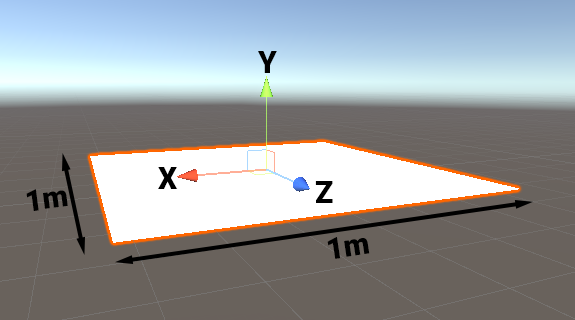
<style>
.page{position:relative;width:575px;height:320px;background:#69625c}
.page>*{position:absolute;margin:0}
.t1{font:30px "Roboto-Black";color:#000000}
</style>
<div class="page">
<p class="t1" style="left:258px;top:51px;width:19px;height:22px">Y</p>
<p class="t1" style="left:158px;top:167px;width:20px;height:22px">X</p>
<p class="t1" style="left:315px;top:181px;width:18px;height:22px">Z</p>
<p class="t1" style="left:26px;top:189px;width:42px;height:22px;rotate:-7deg">1m</p>
<p class="t1" style="left:327px;top:237px;width:43px;height:22px;rotate:-9deg">1m</p>
</div>
